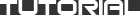
<style>
.page{position:relative;width:140px;height:15px;background:#ffffff}
.page>*{position:absolute;margin:0}
.t1{font:30px "Bitsumishi";color:#ffffff}
</style>
<div class="page">
<p class="t1" style="left:0px;top:0px;width:140px;height:15px">tutorial</p>
</div>
